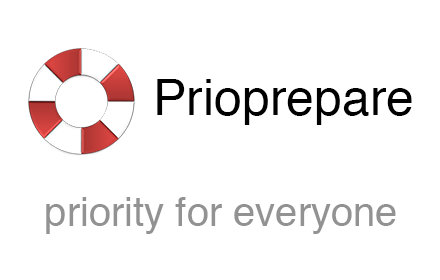
<style>
.page{position:relative;width:440px;height:280px;background:#ffffff}
.page>*{position:absolute;margin:0}
.t1{font:50px "Helvetica";color:#000000}
.t2{font:40px "Helvetica";color:#929292}
</style>
<div class="page">
<p class="t1" style="left:157px;top:79px;width:255px;height:46px">Prioprepare</p>
<p class="t2" style="left:46px;top:197px;width:350px;height:37px">priority for everyone</p>
</div>
